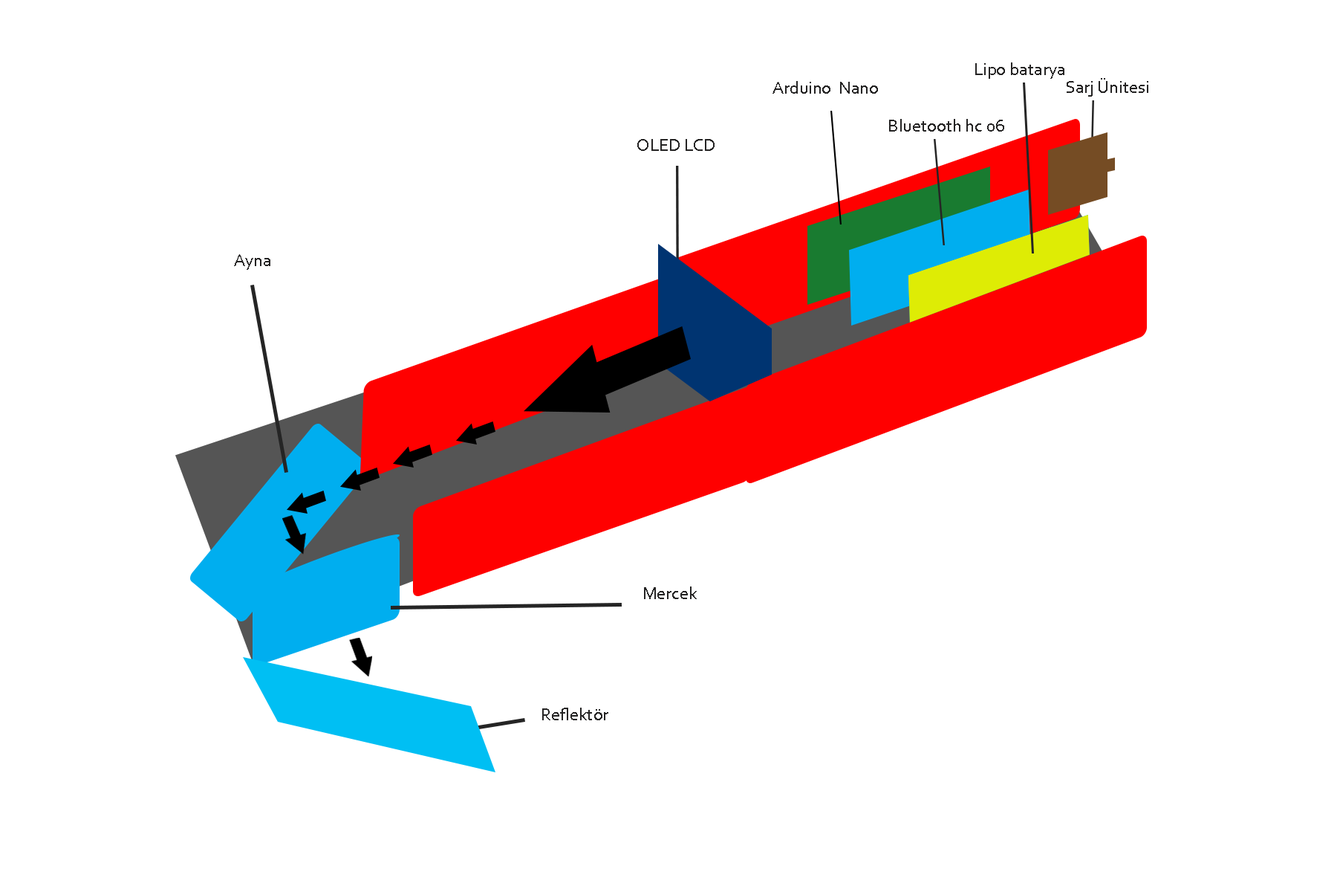
<style>
.page{position:relative;width:1337px;height:892px;background:#ffffff}
.page>*{position:absolute;margin:0}
.t1{font:17.8px "Corbel";color:#252424}
</style>
<div class="page">
<p class="t1" style="left:976px;top:62px;width:89px;height:17px">Lipo batarya</p>
<p class="t1" style="left:773px;top:81px;width:105px;height:13px">Arduino  Nano</p>
<p class="t1" style="left:1067px;top:78px;width:82px;height:19px">Sarj Ünitesi</p>
<p class="t1" style="left:889px;top:119px;width:116px;height:13px">Bluetooth hc 06</p>
<p class="t1" style="left:637px;top:139px;width:78px;height:12px">OLED LCD</p>
<p class="t1" style="left:234px;top:254px;width:36px;height:16px">Ayna</p>
<p class="t1" style="left:644px;top:586px;width:53px;height:13px">Mercek</p>
<p class="t1" style="left:542px;top:707px;width:67px;height:13px">Reflektör</p>
</div>
